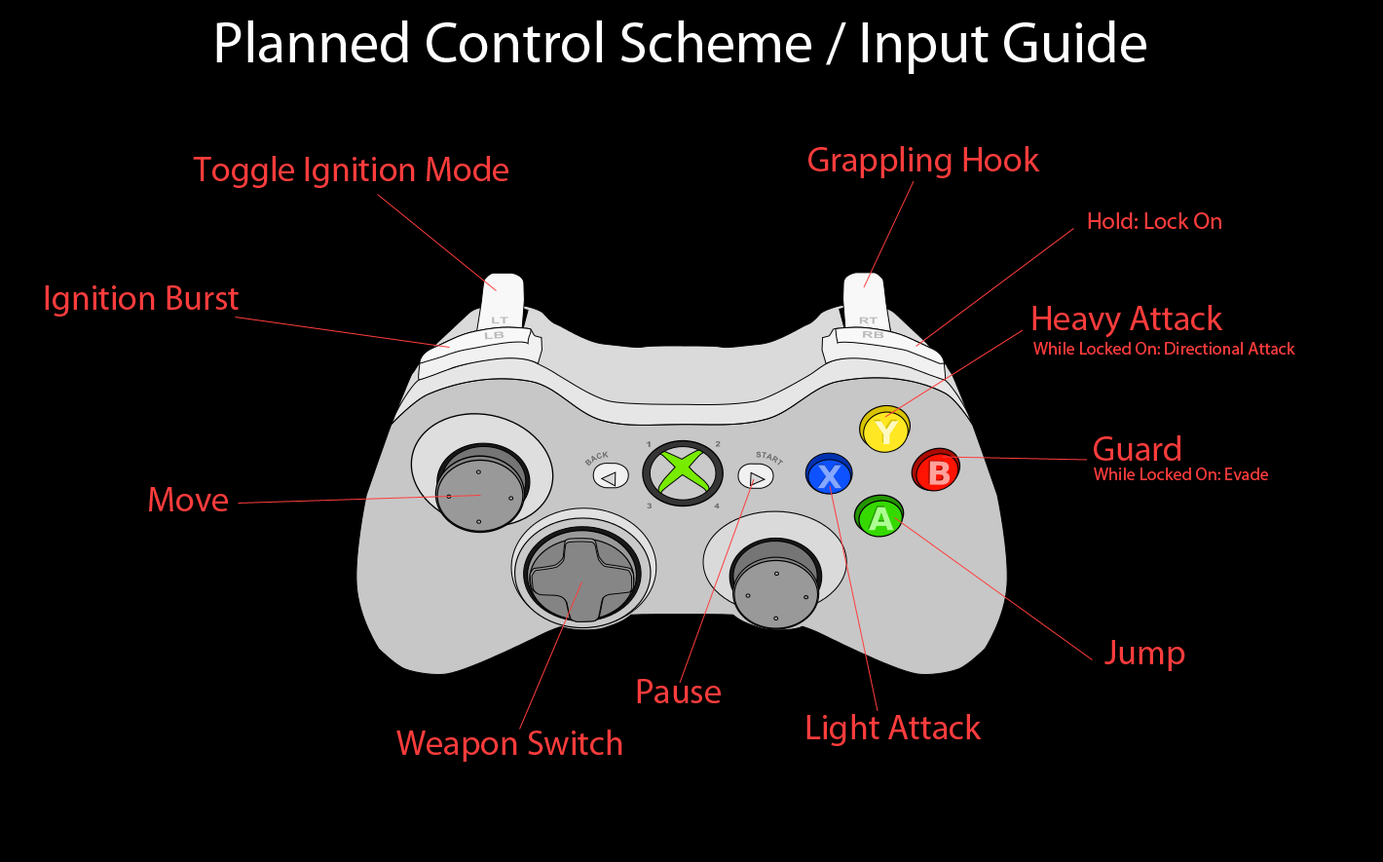
<style>
.page{position:relative;width:1383px;height:862px;background:#000000}
.page>*{position:absolute;margin:0}
.t1{font:58.4px "MyriadPro-Regular";color:#ffffff}
.t2{font:35.1px "MyriadPro-Regular";color:#ff3c3c}
.t3{font:23.4px "MyriadPro-Regular";color:#ff3c3c}
.t4{font:17.5px "MyriadPro-Regular";color:#ff3c3c}
</style>
<div class="page">
<p class="t1" style="left:216px;top:20px;width:931px;height:54px">Planned Control Scheme / Input Guide</p>
<p class="t2" style="left:808px;top:146px;width:232px;height:32px">Grappling Hook</p>
<p class="t2" style="left:193px;top:156px;width:315px;height:32px">Toggle Ignition Mode</p>
<p class="t3" style="left:1088px;top:212px;width:134px;height:17px">Hold: Lock On</p>
<p class="t2" style="left:45px;top:285px;width:194px;height:32px">Ignition Burst</p>
<p class="t2" style="left:1033px;top:305px;width:190px;height:33px">Heavy Attack</p>
<p class="t4" style="left:1034px;top:342px;width:262px;height:13px">While Locked On: Directional Attack</p>
<p class="t2" style="left:1094px;top:435px;width:87px;height:26px">Guard</p>
<p class="t4" style="left:1094px;top:468px;width:174px;height:12px">While Locked On: Evade</p>
<p class="t2" style="left:149px;top:487px;width:79px;height:24px">Move</p>
<p class="t2" style="left:1105px;top:640px;width:80px;height:31px">Jump</p>
<p class="t2" style="left:637px;top:679px;width:84px;height:24px">Pause</p>
<p class="t2" style="left:807px;top:714px;width:175px;height:32px">Light Attack</p>
<p class="t2" style="left:396px;top:730px;width:226px;height:32px">Weapon Switch</p>
</div>
